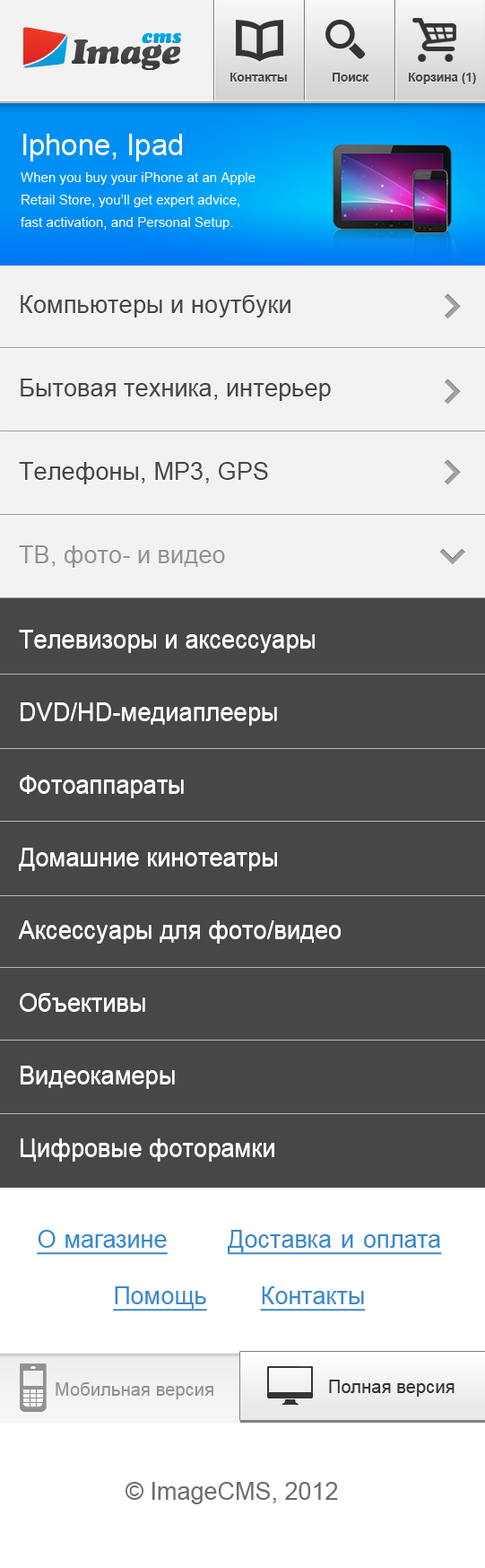
<style>
.page{position:relative;width:485px;height:1568px;background:#474749}
.page>*{position:absolute;margin:0}
.t1{font:12.2px "Arial-BoldMT";color:#474749}
.t2{font:13.6px/22.5px "ArialMT";color:#ffffff}
.t3{font:29.4px/24px "ArialMT";color:#ffffff}
.t4{font:13.6px/27.2px "ArialMT";color:#ffffff}
.t5{font:24.5px "ArialMT";color:#474749}
.t6{font:24.5px "ArialMT";color:#929292}
.t7{font:24.5px/72.7px "ArialMT";color:#ffffff}
.t8{font:24.5px/54.5px "ArialMT";color:#ffffff}
.t9{font:24.2px/56.5px "ArialMT";color:#3a88cc;text-decoration:underline}
.t10{font:18.2px "ArialMT";color:#929292}
.t11{font:18.2px "ArialMT";color:#343434}
.t12{font:24.2px "ArialMT";color:#6d6d6d}
</style>
<div class="page">
<p class="t1" style="left:231px;top:73px;width:56px;height:9px">Контакты</p>
<p class="t1" style="left:333px;top:73px;width:36px;height:9px">Поиск</p>
<p class="t1" style="left:409px;top:73px;width:67px;height:11px">Корзина (1)</p>
<p class="t2" style="left:21px;top:134px;width:235px;height:96px"><span class="t3">Iphone, Ipad<br></span><span class="t4">When you buy your iPhone at an Apple<br></span>Retail Store, you’ll get expert advice, <br>fast activation, and Personal Setup.</p>
<p class="t5" style="left:21px;top:295px;width:270px;height:23px">Компьютеры и ноутбуки</p>
<p class="t5" style="left:21px;top:379px;width:310px;height:22px">Бытовая техника, интерьер</p>
<p class="t5" style="left:19px;top:462px;width:249px;height:22px">Телефоны, MP3, GPS</p>
<p class="t6" style="left:19px;top:545px;width:206px;height:23px">ТВ, фото- и видео</p>
<p class="t7" style="left:18px;top:630px;width:323px;height:531px"><span class="t8">Телевизоры и аксессуары <br></span>DVD/HD-медиаплееры <br>Фотоаппараты<br>Домашние кинотеатры<br>Аксессуары для фото/видео<br>Объективы<br>Видеокамеры<br>Цифровые фоторамки<br>Карты памяти</p>
<p class="t9" style="left:37px;top:1230px;width:405px;height:81px;text-align:center">Омагазине         Доставкаиоплата           <br>Помощь        Контакты</p>
<p class="t10" style="left:56px;top:1382px;width:157px;height:17px">Мобильная версия</p>
<p class="t11" style="left:329px;top:1380px;width:126px;height:17px">Полная версия</p>
<p class="t12" style="left:126px;top:1482px;width:212px;height:22px">© ImageCMS, 2012</p>
</div>
